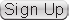
<style>
.page{position:relative;width:69px;height:20px}
.page>*{position:absolute;margin:0}
.t1{font:15.8px "ArialMT";color:#231f20}
</style>
<div class="page">
<p class="t1" style="left:5px;top:3px;width:58px;height:15px">Sign Up</p>
</div>
